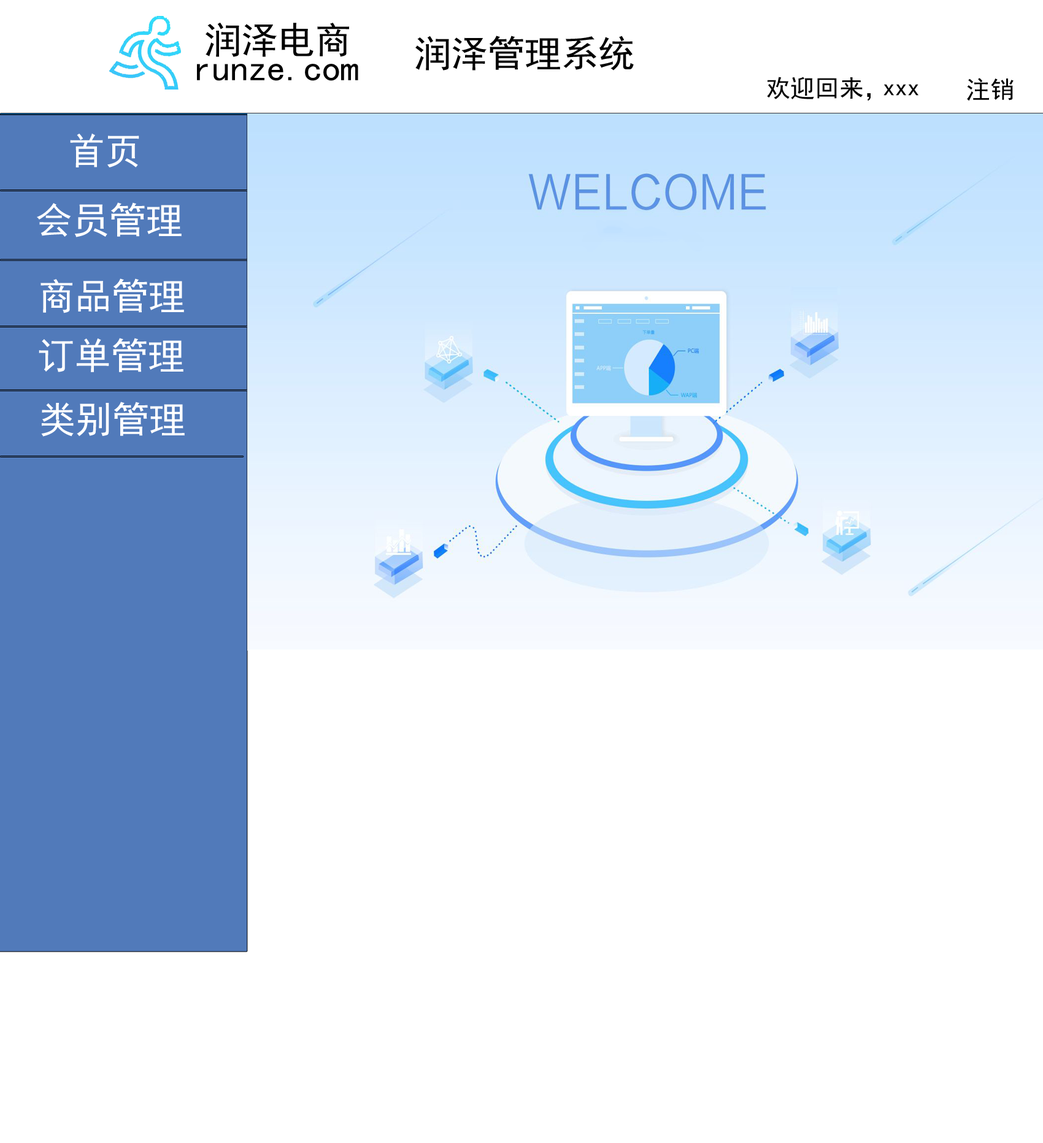
<style>
.page{position:relative;width:1043px;height:1143px;background:#ffffff}
.page>*{position:absolute;margin:0}
.t1{font:36.8px "SimHei";color:#010101}
.t2{font:24.5px "SimHei";color:#000000}
.t3{font:36.8px "SimHei";color:#ffffff}
</style>
<div class="page">
<p class="t1" style="left:206px;top:23px;width:143px;height:34px">润泽电商</p>
<p class="t1" style="left:415px;top:36px;width:219px;height:35px">润泽管理系统</p>
<p class="t1" style="left:197px;top:64px;width:161px;height:17px">runze.com</p>
<p class="t2" style="left:767px;top:77px;width:103px;height:24px">欢迎回来，</p>
<p class="t2" style="left:967px;top:78px;width:46px;height:23px">注销</p>
<p class="t2" style="left:883px;top:84px;width:35px;height:12px">xxx</p>
<p class="t3" style="left:70px;top:133px;width:69px;height:34px">首页</p>
<p class="t3" style="left:37px;top:202px;width:145px;height:35px">会员管理</p>
<p class="t3" style="left:40px;top:279px;width:144px;height:34px">商品管理</p>
<p class="t3" style="left:39px;top:338px;width:144px;height:34px">订单管理</p>
<p class="t3" style="left:41px;top:402px;width:144px;height:35px">类别管理</p>
</div>
